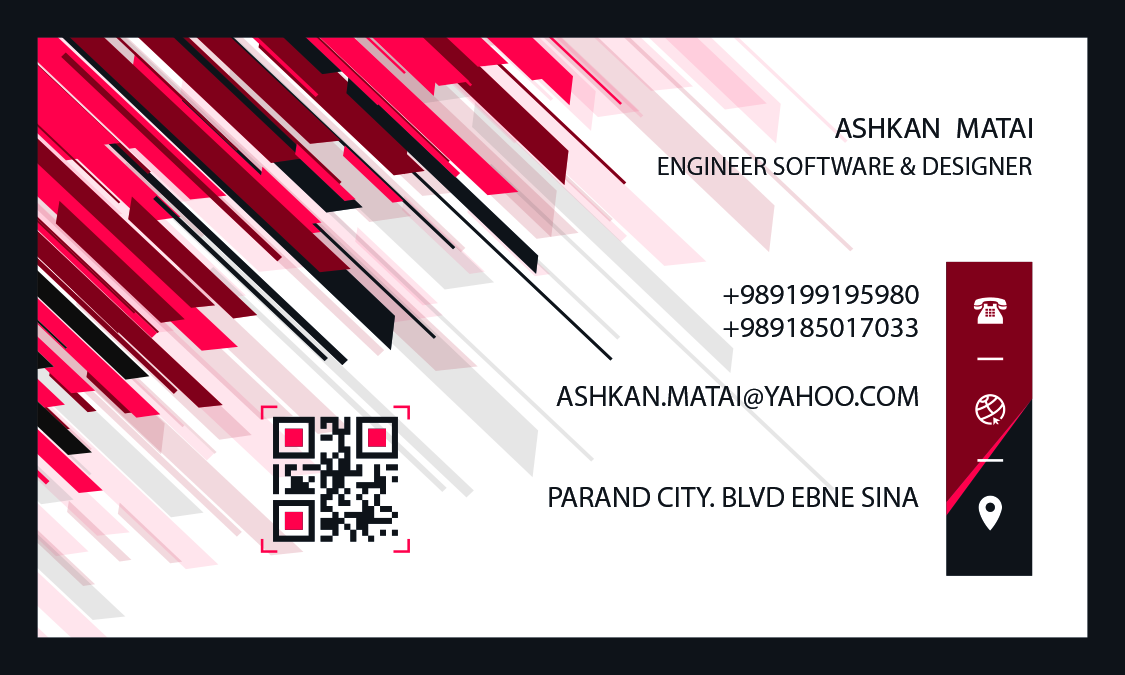
<style>
.page{position:relative;width:1125px;height:675px;background:#ffffff}
.page>*{position:absolute;margin:0}
.t1{font:41.7px "MyriadArabic-Regular";color:#0e131a}
.t2{font:26.2px "MyriadPro-Regular";color:#0e131a}
.t3{font:29.2px/33.3px "MyriadPro-Regular";color:#0e131a}
.t4{font:29.2px "MyriadPro-Regular";color:#0e131a}
</style>
<div class="page">
<p class="t1" style="left:835px;top:118px;width:197px;height:20px">ASHKAN  MATAI</p>
<p class="t2" style="left:658px;top:157px;width:374px;height:18px">ENGINEER SOFTWARE &amp; DESIGNER</p>
<p class="t3" style="left:723px;top:285px;width:196px;height:52px;text-align:right">+989199195980<br>+989185017033</p>
<p class="t4" style="left:556px;top:386px;width:362px;height:23px">ASHKAN.MATAI@YAHOO.COM</p>
<p class="t4" style="left:549px;top:487px;width:370px;height:20px">PARAND CITY. BLVD EBNE SINA</p>
</div>
